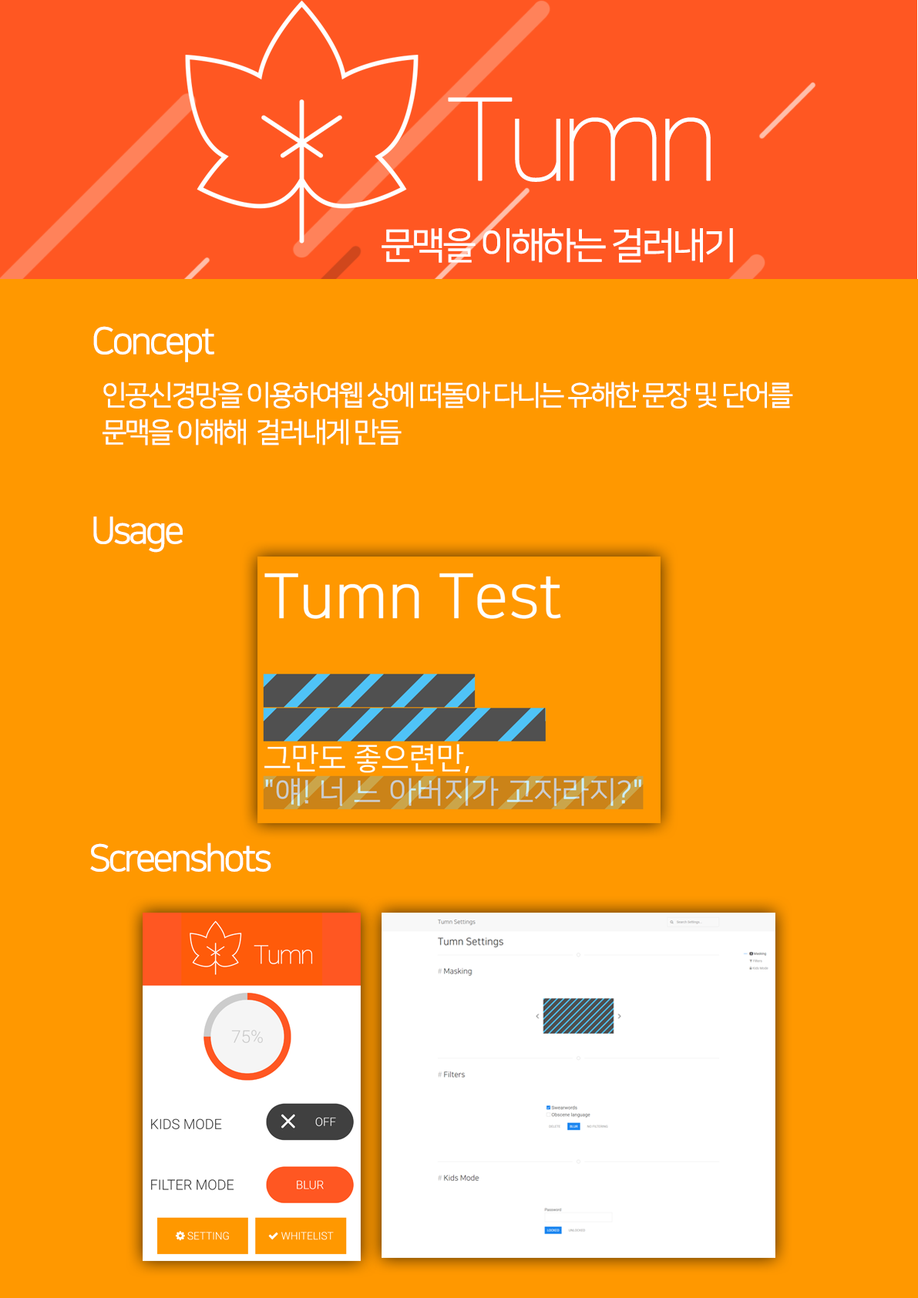
<style>
.page{position:relative;width:918px;height:1298px;background:#ff9800}
.page>*{position:absolute;margin:0}
.t1{font:115.7px "Roboto-Thin";letter-spacing:-0.1em;color:#ffffff;font-weight:bold}
.t2{font:37px "NanumSquareR";letter-spacing:-0.1em;color:#ffffff;font-weight:bold}
.t3{font:27.8px/37px "NanumSquareR";letter-spacing:-0.1em;color:#ffffff;font-weight:bold}
</style>
<div class="page">
<p class="t1" style="left:448px;top:97px;width:263px;height:85px">Tumn</p>
<p class="t2" style="left:382px;top:228px;width:351px;height:35px">문맥을 이해하는 걸러내기</p>
<p class="t2" style="left:93px;top:326px;width:121px;height:36px">Concept</p>
<p class="t3" style="left:103px;top:382px;width:690px;height:64px">인공신경망을 이용하여웹 상에 떠돌아 다니는 유해한 문장 및 단어를<br>문맥을 이해해  걸러내게 만듬</p>
<p class="t2" style="left:93px;top:517px;width:90px;height:36px">Usage</p>
<p class="t2" style="left:90px;top:843px;width:181px;height:29px">Screenshots</p>
</div>
